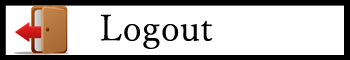
<style>
.page{position:relative;width:350px;height:60px;background:#ffffff}
.page>*{position:absolute;margin:0}
.t1{font:36px "YuMincho-Regular";color:#000000}
</style>
<div class="page">
<p class="t1" style="left:100px;top:14px;width:113px;height:35px">Logout</p>
</div>
